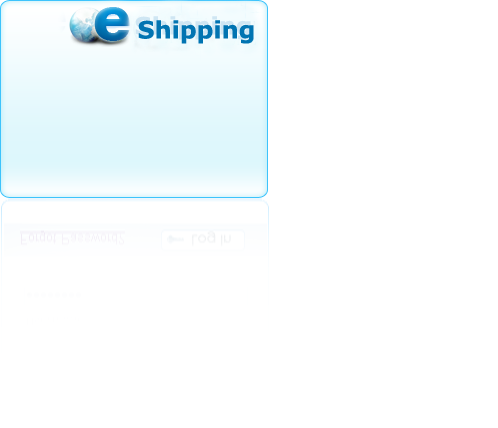
<style>
.page{position:relative;width:498px;height:428px;background:#ffffff}
.page>*{position:absolute;margin:0}
.t1{font:24px "Verdana-Bold";color:#0174b2}
</style>
<div class="page">
<p class="t1" style="left:138px;top:20px;width:116px;height:24px">Shipping</p>
</div>
